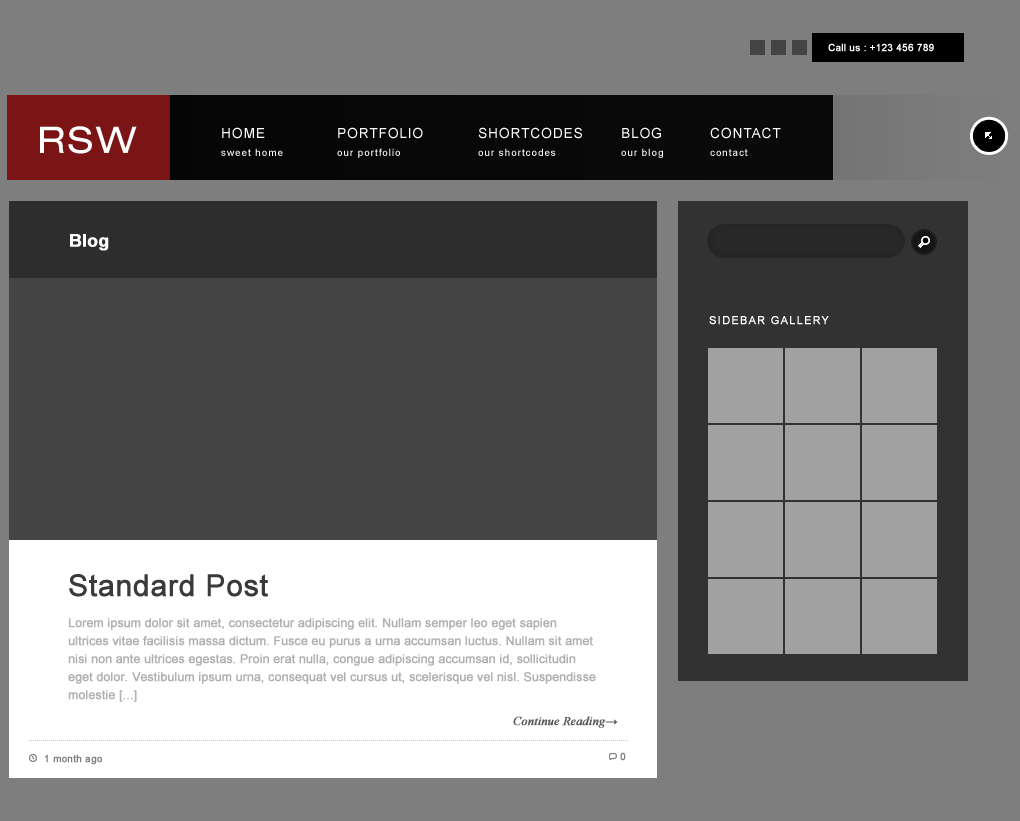
<style>
.page{position:relative;width:1020px;height:821px;background:#7e7e7e}
.page>*{position:absolute;margin:0}
.t1{font:10px "ArialMT";color:#ffffff;font-weight:bold}
.t2{font:36.7px "HelveticaNeueLTPro-Ex";letter-spacing:0.09em;color:#ffffff;text-transform:uppercase}
.t3{font:14px "ArialMT";letter-spacing:0.05em;color:#ffffff}
.t4{font:10px "ArialMT";letter-spacing:0.09em;color:#ffffff}
.t5{font:17.4px "Arial-BoldMT";color:#ffffff;font-weight:bold}
.t6{font:11px "ArialMT";letter-spacing:0.09em;color:#ffffff;text-transform:uppercase;font-weight:bold}
.t7{font:30px "ArialMT";color:#3a3a3a;font-weight:bold}
.t8{font:12px/18px "ArialMT";color:#b0b0b0;font-weight:bold}
.t9{font:12px "TimesNewRomanPS-ItalicMT";color:#5a5a5a;font-weight:bold}
.t10{font:10px "ArialMT";color:#7f7f7f;font-weight:bold}
</style>
<div class="page">
<p class="t1" style="left:828px;top:43px;width:106px;height:9px">Call us : +123 456 789</p>
<p class="t2" style="left:40px;top:126px;width:97px;height:28px">RSW</p>
<p class="t3" style="left:222px;top:127px;width:43px;height:12px">HOME</p>
<p class="t3" style="left:338px;top:127px;width:85px;height:12px">PORTFOLIO</p>
<p class="t3" style="left:478px;top:127px;width:104px;height:12px">SHORTCODES</p>
<p class="t3" style="left:622px;top:127px;width:39px;height:12px">BLOG</p>
<p class="t3" style="left:710px;top:127px;width:71px;height:12px">CONTACT</p>
<p class="t4" style="left:221px;top:148px;width:62px;height:8px">sweet home</p>
<p class="t4" style="left:337px;top:148px;width:63px;height:10px">our portfolio</p>
<p class="t4" style="left:478px;top:148px;width:78px;height:8px">our shortcodes</p>
<p class="t4" style="left:621px;top:148px;width:42px;height:10px">our blog</p>
<p class="t4" style="left:710px;top:149px;width:38px;height:7px">contact</p>
<p class="t5" style="left:70px;top:234px;width:39px;height:17px">Blog</p>
<p class="t6" style="left:709px;top:316px;width:120px;height:9px">SIDEBAR GALLERY</p>
<p class="t7" style="left:69px;top:574px;width:199px;height:23px">Standard Post</p>
<p class="t8" style="left:68px;top:618px;width:528px;height:84px">Lorem ipsum dolor sit amet, consectetur adipiscing elit. Nullam semper leo eget sapien ultrices vitae facilisis massa dictum. Fusce eu purus a urna accumsan luctus. Nullam sit amet nisi non ante ultrices egestas. Proin erat nulla, congue adipiscing accumsan id, sollicitudin eget dolor. Vestibulum ipsum urna, consequat vel cursus ut, scelerisque vel nisl. Suspendisse molestie [...]</p>
<p class="t9" style="left:513px;top:716px;width:105px;height:12px">Continue Reading→</p>
<p class="t10" style="left:45px;top:754px;width:57px;height:11px">1 month ago</p>
<p class="t10" style="left:620px;top:752px;width:6px;height:9px">0</p>
</div>
